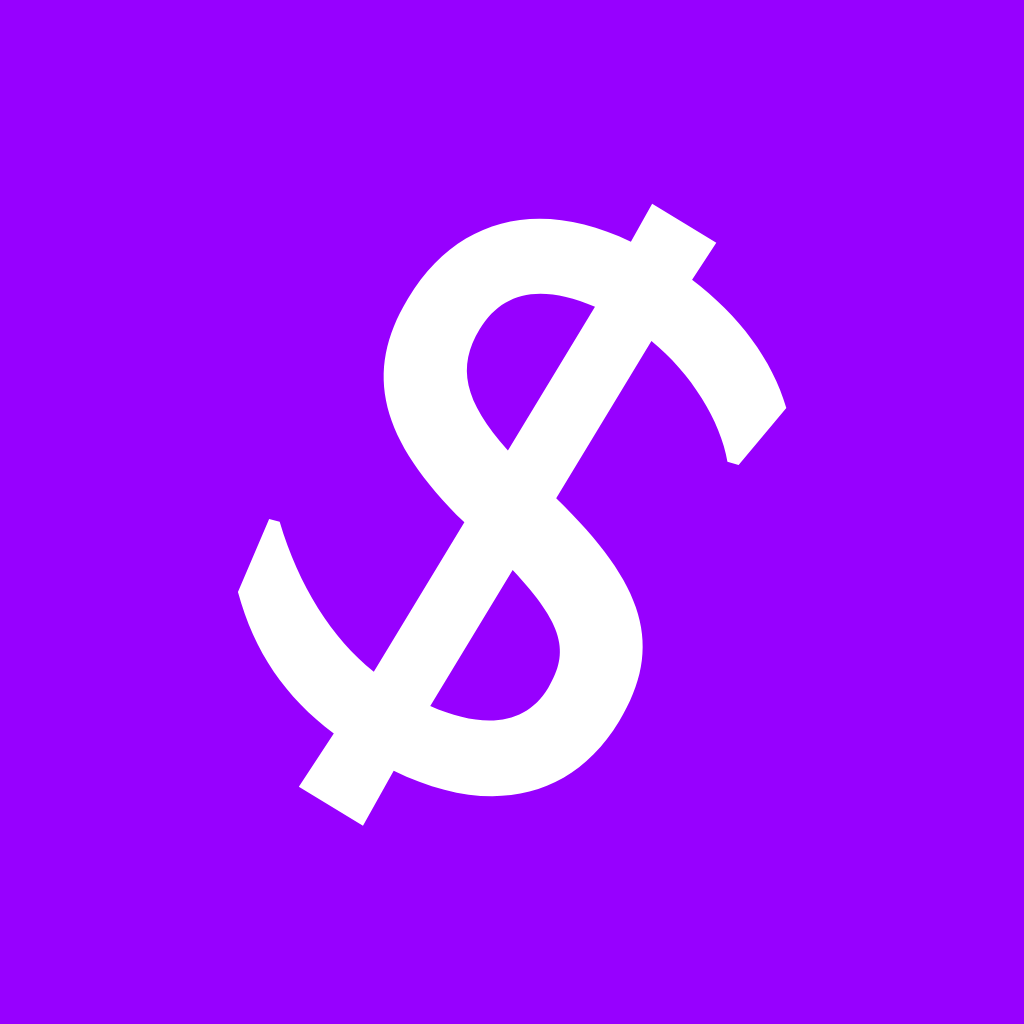
<style>
.page{position:relative;width:1024px;height:1024px;background:#9700ff}
.page>*{position:absolute;margin:0}
.t1{font:750px "Farro-Regular";color:#ffffff}
</style>
<div class="page">
<p class="t1" style="left:237px;top:198px;width:550px;height:628px;rotate:31deg">$</p>
</div>
